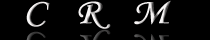
<style>
.page{position:relative;width:210px;height:40px;background:#000000}
.page>*{position:absolute;margin:0}
.t1{font:36px "MonotypeCorsiva";font-weight:bold;scale:1.2 1}
.t2{font:36px "MonotypeCorsiva";font-weight:bold;scale:1.5 1}
</style>
<div class="page">
<p class="t1" style="left:26px;top:0px;width:145px;height:29px"><span class="t2"> </span>C   R   M</p>
</div>
